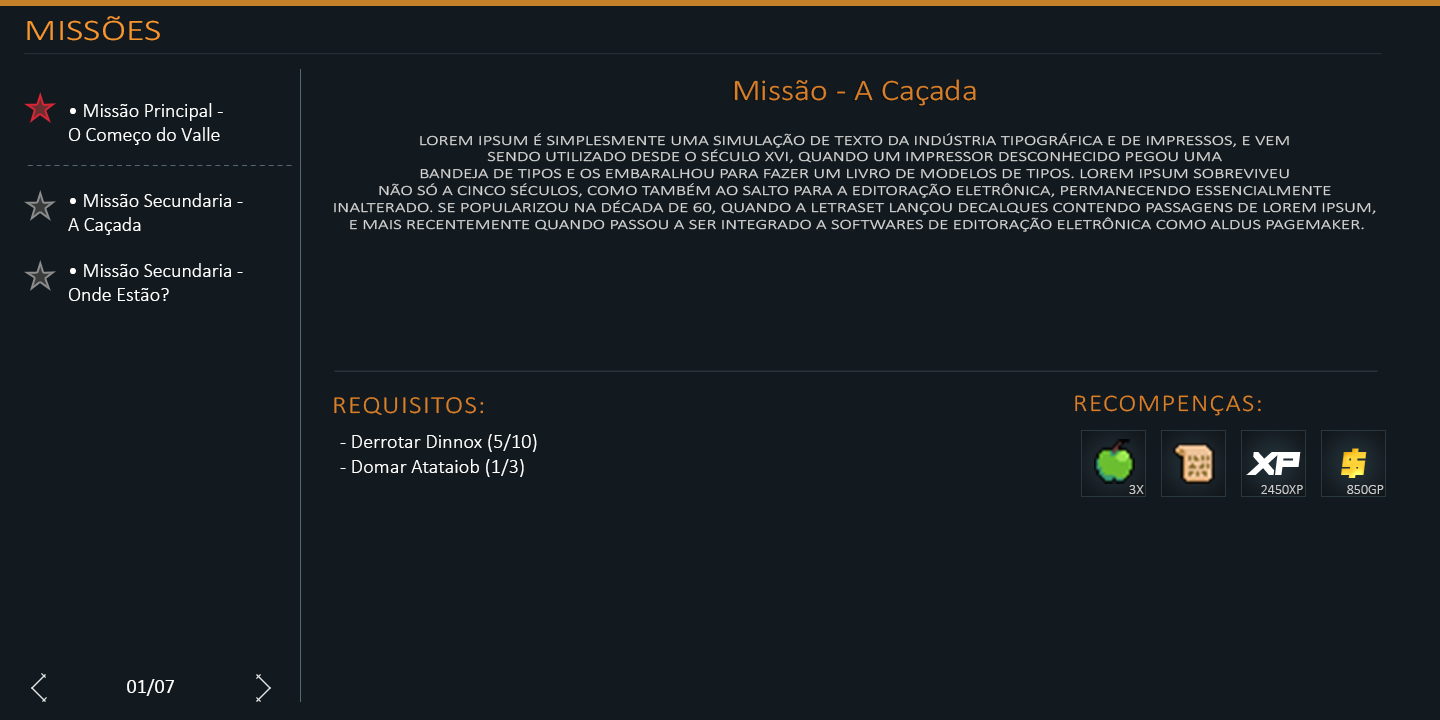
<style>
.page{position:relative;width:1440px;height:720px;background:#121a1f}
.page>*{position:absolute;margin:0}
.t1{font:30px "Calibri-Light";color:#f7962e;text-transform:uppercase;scale:1.27 1}
.t2{font:30px "Calibri-Light";color:#d87f27;scale:1.12 1}
.t3{font:20px "Calibri-Light";color:#ffffff}
.t4{font:14px "Calibri-Light";color:#d6d6d6;text-transform:uppercase;scale:1.35 1}
.t5{font:20px "Calibri-Light";letter-spacing:0.14em;color:#556971}
.t6{font:24.5px "Calibri-Light";letter-spacing:0.05em;color:#d87f27;scale:1.12 1}
.t7{font:24px "Calibri-Light";letter-spacing:0.05em;color:#d87f27;scale:1.12 1}
.t8{font:20.5px "Calibri-Light";color:#ffffff}
.t9{font:33px "PlayPretend";color:#ffd338}
.t10{font:33px "PlayPretend";color:#ffffff}
.t11{font:15px "Calibri-Light";color:#cdcdcd;text-transform:uppercase}
.t12{font:14px "Calibri-Light";color:#cdcdcd;text-transform:uppercase}
.t13{font:20px "Calibri";color:#ffffff}
</style>
<div class="page">
<p class="t1" style="left:27px;top:16px;width:133px;height:25px">Missões</p>
<p class="t2" style="left:734px;top:79px;width:242px;height:27px">Missão  - A Caçada</p>
<p class="t3" style="left:69px;top:103px;width:154px;height:42px">• Missão Principal - <br>O Começo do Valle</p>
<p class="t4" style="left:334px;top:133px;width:1042px;height:99px;text-align:center">Lorem Ipsum é simplesmente uma simulação de texto da indústria tipográfica e de impressos, e vem <br>sendo utilizado desde o século XVI, quando um impressor desconhecido pegou uma <br>bandeja de tipos e os embaralhou para fazer um livro de modelos de tipos. Lorem Ipsum sobreviveu <br>não só a cinco séculos, como também ao salto para a editoração eletrônica, permanecendo essencialmente <br>inalterado. Se popularizou na década de 60, quando a Letraset lançou decalques contendo passagens de Lorem Ipsum, <br>e mais recentemente quando passou a ser integrado a softwares de editoração eletrônica como Aldus PageMaker.</p>
<p class="t5" style="left:27px;top:165px;width:265px;height:1px">------------------------------</p>
<p class="t3" style="left:68px;top:193px;width:175px;height:42px">• Missão Secundaria - <br>A Caçada</p>
<p class="t3" style="left:69px;top:263px;width:174px;height:38px">• Missão Secundaria - <br>Onde Estão?</p>
<p class="t6" style="left:334px;top:397px;width:150px;height:18px">REQUISITOS:</p>
<p class="t7" style="left:1075px;top:395px;width:186px;height:21px">RECOMPENÇAS:</p>
<p class="t8" style="left:340px;top:434px;width:197px;height:43px">- Derrotar Dinnox (5/10)<br>- Domar Atataiob (1/3)</p>
<p class="t9" style="left:1341px;top:448px;width:26px;height:30px">$</p>
<p class="t10" style="left:1246px;top:452px;width:55px;height:23px">XP</p>
<p class="t11" style="left:1129px;top:485px;width:15px;height:9px">3x</p>
<p class="t12" style="left:1261px;top:485px;width:42px;height:9px">2450xp</p>
<p class="t12" style="left:1347px;top:485px;width:37px;height:9px">850GP</p>
<p class="t13" style="left:127px;top:679px;width:47px;height:17px">01/07</p>
</div>
